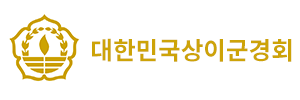
<style>
.page{position:relative;width:300px;height:100px;background:#ffffff}
.page>*{position:absolute;margin:0}
.t1{font:24.6px "NotoSansCJKkr-Bold";color:#cda308}
</style>
<div class="page">
<p class="t1" style="left:92px;top:38px;width:200px;height:24px">대한민국상이군경회</p>
</div>
